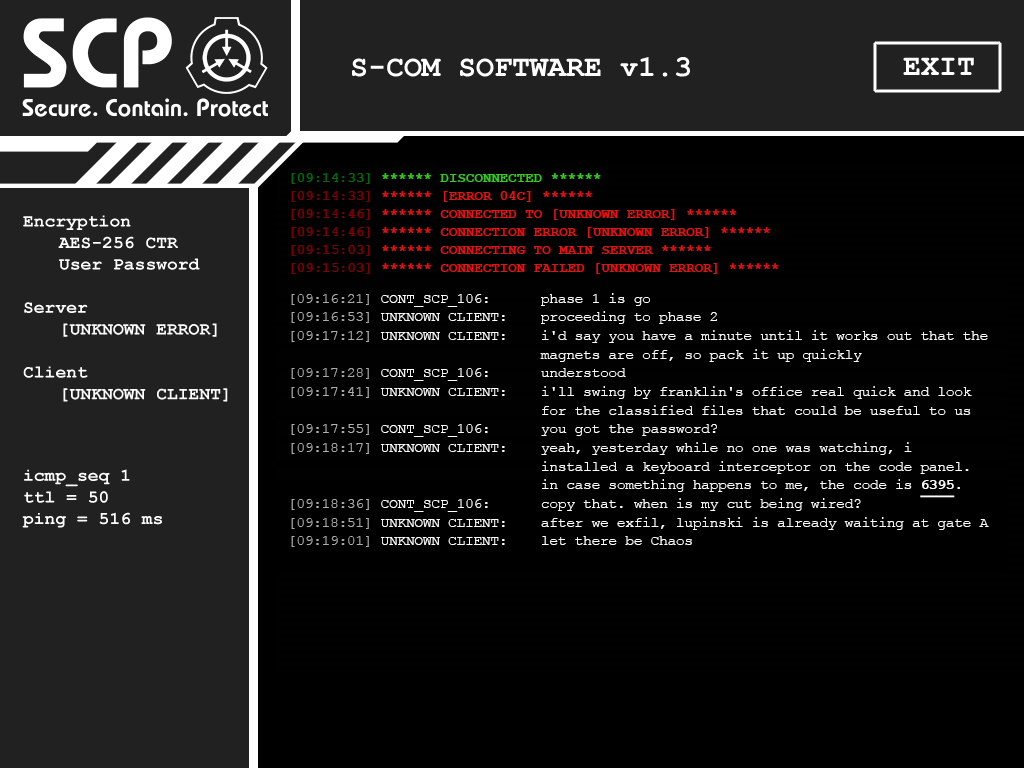
<style>
.page{position:relative;width:1024px;height:768px;background:#010101}
.page>*{position:absolute;margin:0}
.t1{font:14.7px "CourierNewPSMT";letter-spacing:-0.025em;color:#027509}
.t2{font:14.7px "CourierNewPSMT";letter-spacing:-0.025em;color:#7d0202}
.t3{font:14.7px "CourierNewPSMT";letter-spacing:-0.025em;color:#7a0202}
.t4{font:14.7px "CourierNewPSMT";letter-spacing:-0.025em;color:#7a0303}
.t5{font:14.7px "CourierNewPSMT";letter-spacing:-0.025em;color:#7d0303}
.t6{font:14.7px "CourierNewPSMT";letter-spacing:-0.025em;color:#800303}
.t7{font:14.7px/18.7px "CourierNewPSMT";letter-spacing:-0.025em;color:#ffffff}
.t8{font:14.7px/18.7px "CourierNewPSMT";letter-spacing:-0.025em;color:#acacad}
.t9{font:14.7px/18.7px "CourierNewPSMT";letter-spacing:-0.025em;color:#afafb0}
.t10{font:14.7px/18.7px "CourierNewPSMT";letter-spacing:-0.025em;color:#a9a9aa}
.t11{font:14.7px/18.7px "CourierNewPSMT";letter-spacing:-0.025em;color:#b2b2b3}
.t12{font:14.7px/18.7px "CourierNewPS-BoldMT";letter-spacing:-0.025em;color:#ffffff;text-decoration:underline}
.t13{font:14.7px/18.7px "CourierNewPSMT";letter-spacing:-0.025em;color:#b0b0b0}
</style>
<div class="page">
<p class="t1" style="left:332px;top:173px;width:6px;height:9px">4</p>
<p class="t2" style="left:332px;top:191px;width:6px;height:9px">4</p>
<p class="t3" style="left:332px;top:209px;width:6px;height:9px">4</p>
<p class="t4" style="left:332px;top:227px;width:6px;height:9px">4</p>
<p class="t5" style="left:332px;top:245px;width:7px;height:9px">5</p>
<p class="t6" style="left:332px;top:263px;width:7px;height:9px">5</p>
<p class="t7" style="left:291px;top:293px;width:698px;height:254px"><span class="t8">[09:16:21]</span> CONT_SCP_106:      phase 1 is go<br><span class="t8">[09:16:53]</span> UNKNOWN CLIENT:    proceeding to phase 2<br><span class="t9">[09:17:12]</span> UNKNOWN CLIENT:    i'd say you have a minute until it works out that the<br>                              magnets are off, so pack it up quickly<br><span class="t10">[09:17:28]</span> CONT_SCP_106:      understood<br><span class="t9">[09:17:41]</span> UNKNOWN CLIENT:    i'll swing by franklin's office real quick and look<br>                              for the classified files that could be useful to us<br><span class="t11">[09:17:55]</span> CONT_SCP_106:      you got the password?<br><span class="t9">[09:18:17]</span> UNKNOWN CLIENT:    yeah, yesterday while no one was watching, i<br>                              installed a keyboard interceptor on the code panel.<br>                              in case something happens to me, the code is <span class="t12">6395</span>.<br><span class="t13">[09:18:36]</span> CONT_SCP_106:      copy that. when is my cut being wired? <br><span class="t8">[09:18:51]</span> UNKNOWN CLIENT:    after we exfil, lupinski is already waiting at gate A <span class="t8">[09:19:01]</span> UNKNOWN CLIENT:    let there be Chaos</p>
</div>
